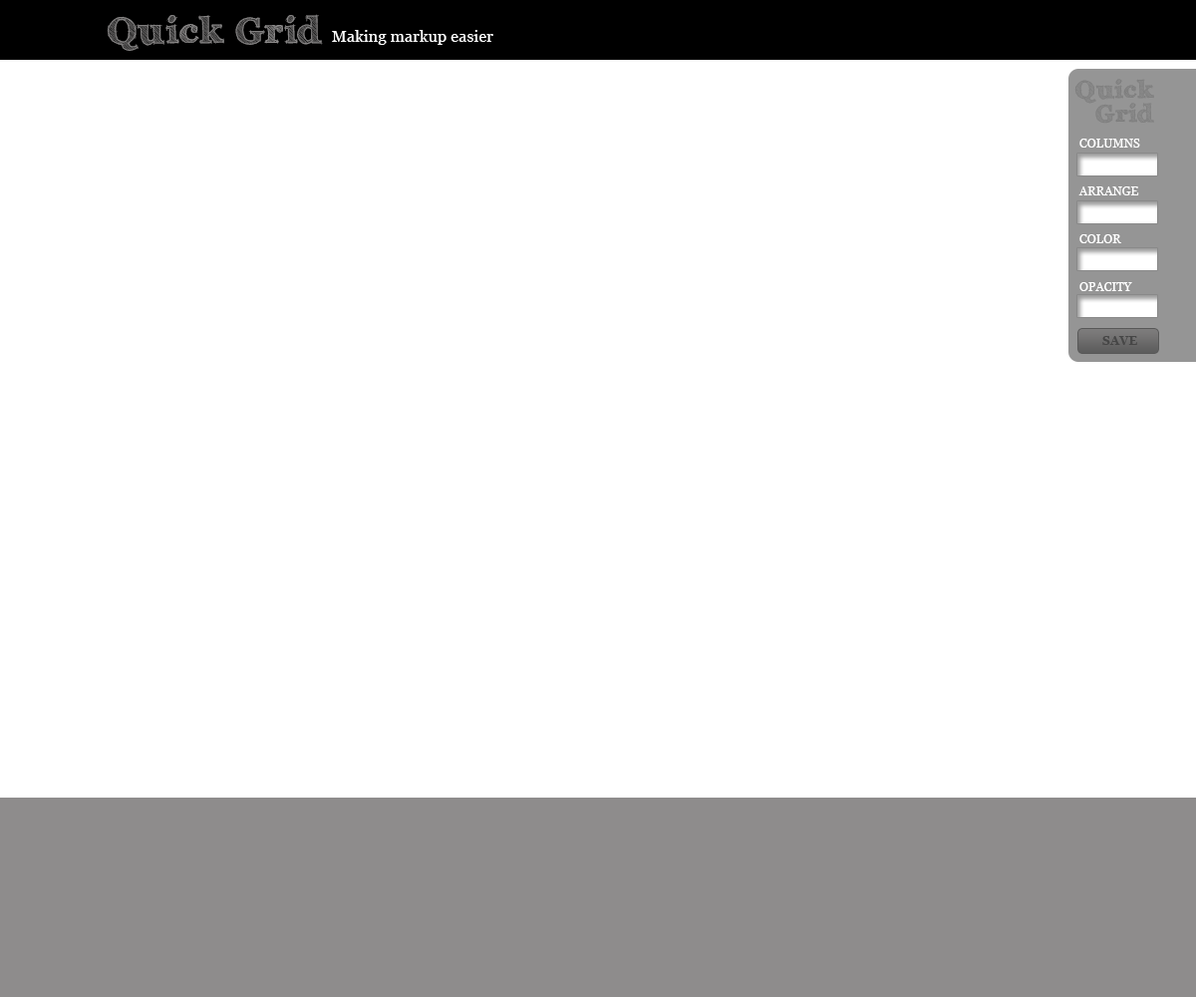
<style>
.page{position:relative;width:1196px;height:997px;background:#ffffff}
.page>*{position:absolute;margin:0}
.t1{font:35.9px "Archistico-Bold";letter-spacing:0.01em;color:#8e8c8c}
.t2{font:15.9px "Georgia";letter-spacing:0.01em;color:#ffffff}
.t3{font:23.9px/23.9px "Archistico-Bold";letter-spacing:0.01em;color:#7d7d7d}
.t4{font:12px "Georgia-Bold";letter-spacing:0.01em;color:#464646}
</style>
<div class="page">
<p class="t1" style="left:107px;top:14px;width:216px;height:37px">Quick Grid</p>
<p class="t2" style="left:332px;top:30px;width:161px;height:15px">Making markup easier</p>
<p class="t3" style="left:1075px;top:79px;width:79px;height:45px;text-align:right">Quick<br>Grid</p>
<p class="t4" style="left:1103px;top:336px;width:34px;height:9px">SAVE</p>
</div>
